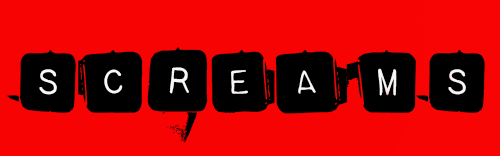
<style>
.page{position:relative;width:500px;height:156px;background:#f80303}
.page>*{position:absolute;margin:0}
.t1{font:79.2px "BackspacerOT-Square";color:#000000}
</style>
<div class="page">
<p class="t1" style="left:7px;top:47px;width:478px;height:96px">Screams</p>
</div>
